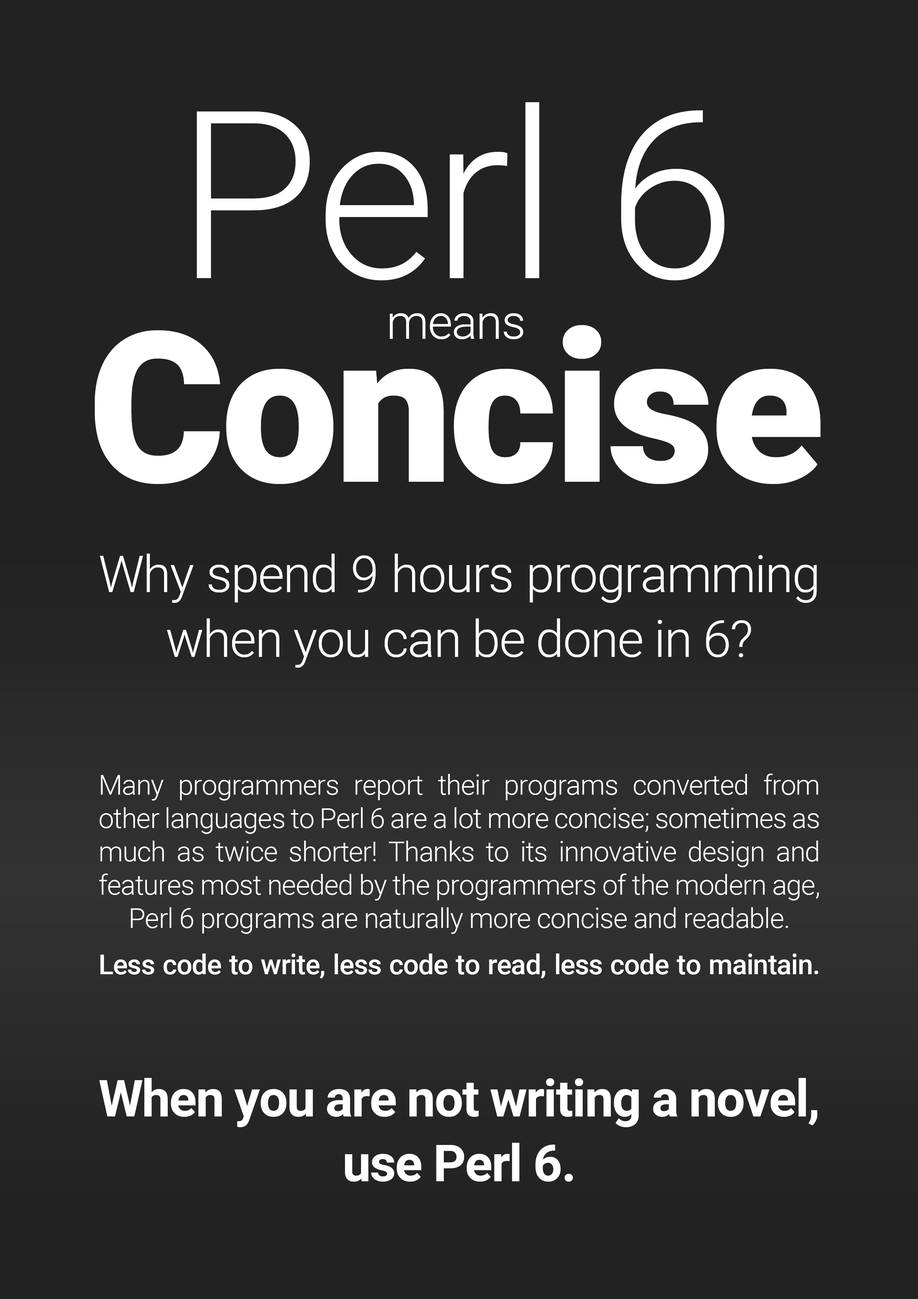
<style>
.page{position:relative;width:918px;height:1299px;background:#222223}
.page>*{position:absolute;margin:0}
.t1{font:234.5px "Roboto-Light";letter-spacing:-0.02em;color:#ffffff}
.t2{font:47.8px "Roboto-Light";letter-spacing:-0.02em;color:#ffffff}
.t3{font:209.8px "Roboto-Black";letter-spacing:-0.02em;color:#ffffff}
.t4{font:50.9px/64.8px "Roboto-Light";letter-spacing:-0.02em;color:#ffffff}
.t5{font:27.8px "Roboto-Light";letter-spacing:-0.02em;color:#ffffff}
.t6{font:27.8px/47.8px "Roboto-Medium";letter-spacing:-0.02em;color:#ffffff}
.t7{font:50.9px/64.8px "Roboto-Bold";letter-spacing:-0.02em;color:#ffffff}
</style>
<div class="page">
<p class="t1" style="left:197px;top:102px;width:528px;height:178px">Perl 6</p>
<p class="t2" style="left:390px;top:313px;width:133px;height:26px">means</p>
<p class="t3" style="left:95px;top:325px;width:726px;height:159px"><span class="t1"><br></span>Concise</p>
<p class="t4" style="left:100px;top:553px;width:717px;height:115px;text-align:justify">Why spend 9 hours programming when you can be done in 6?</p>
<p class="t5" style="left:99px;top:773px;width:720px;height:205px;text-align:justify">Many programmers report their programs converted from other languages to Perl 6 are a lot more concise; sometimes as much as twice shorter! Thanks to its innovative design and features most needed by the programmers of the modern age, Perl 6 programs are naturally more concise and readable.<br><span class="t6">Less code to write, less code to read, less code to maintain.</span></p>
<p class="t7" style="left:99px;top:1078px;width:718px;height:103px;text-align:justify">When you are not writing a novel, use Perl 6.</p>
</div>
